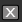
<style>
.page{position:relative;width:22px;height:22px;background:#333333}
.page>*{position:absolute;margin:0}
.t1{font:12.4px "Helvetica";color:#ffffff;scale:1.25 1}
</style>
<div class="page">
<p class="t1" style="left:5px;top:8px;width:11px;height:9px">X</p>
</div>
